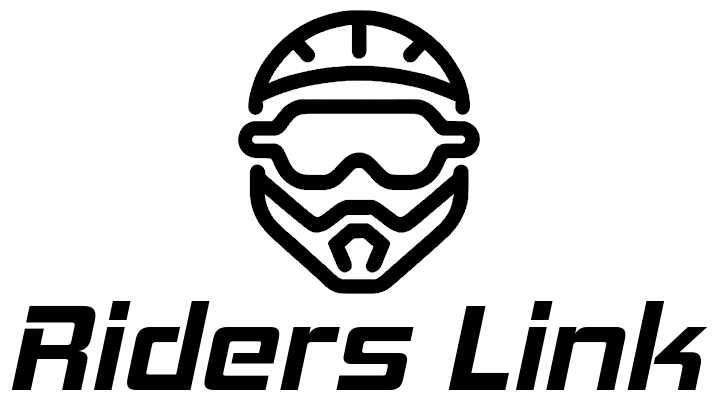
<style>
.page{position:relative;width:718px;height:402px;background:#ffffff}
.page>*{position:absolute;margin:0}
.t1{font:124.5px "HemiHeadRg-BoldItalic";color:#000000}
</style>
<div class="page">
<p class="t1" style="left:11px;top:301px;width:697px;height:89px">Riders Link</p>
</div>
